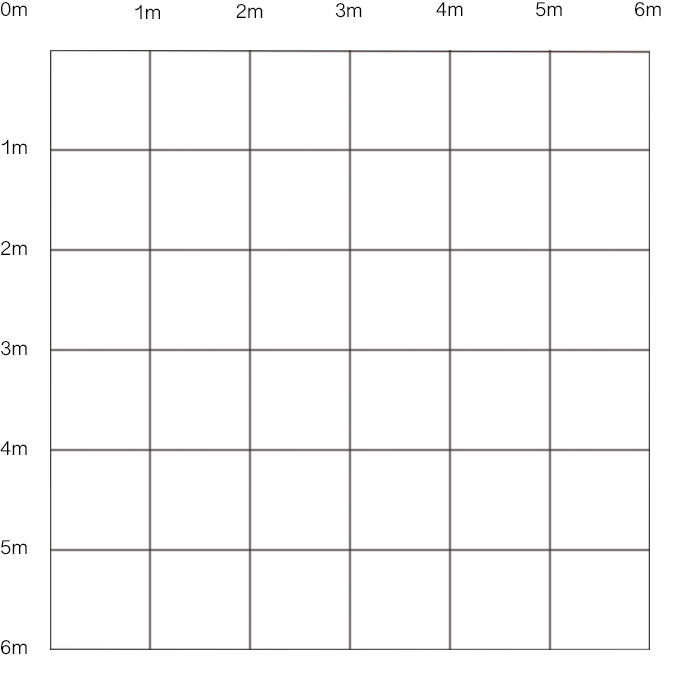
<style>
.page{position:relative;width:700px;height:700px;background:#ffffff}
.page>*{position:absolute;margin:0}
.t1{font:19px "TeluguSangamMN";color:#000000}
</style>
<div class="page">
<p class="t1" style="left:1px;top:2px;width:26px;height:14px">0m</p>
<p class="t1" style="left:135px;top:5px;width:25px;height:14px">1m</p>
<p class="t1" style="left:236px;top:4px;width:27px;height:14px">2m</p>
<p class="t1" style="left:335px;top:3px;width:27px;height:15px">3m</p>
<p class="t1" style="left:436px;top:2px;width:27px;height:14px">4m</p>
<p class="t1" style="left:536px;top:2px;width:26px;height:15px">5m</p>
<p class="t1" style="left:635px;top:2px;width:26px;height:15px">6m</p>
<p class="t1" style="left:2px;top:140px;width:25px;height:14px">1m</p>
<p class="t1" style="left:1px;top:241px;width:26px;height:14px">2m</p>
<p class="t1" style="left:1px;top:341px;width:26px;height:15px">3m</p>
<p class="t1" style="left:0px;top:441px;width:27px;height:14px">4m</p>
<p class="t1" style="left:1px;top:540px;width:26px;height:15px">5m</p>
<p class="t1" style="left:1px;top:640px;width:26px;height:15px">6m</p>
</div>
